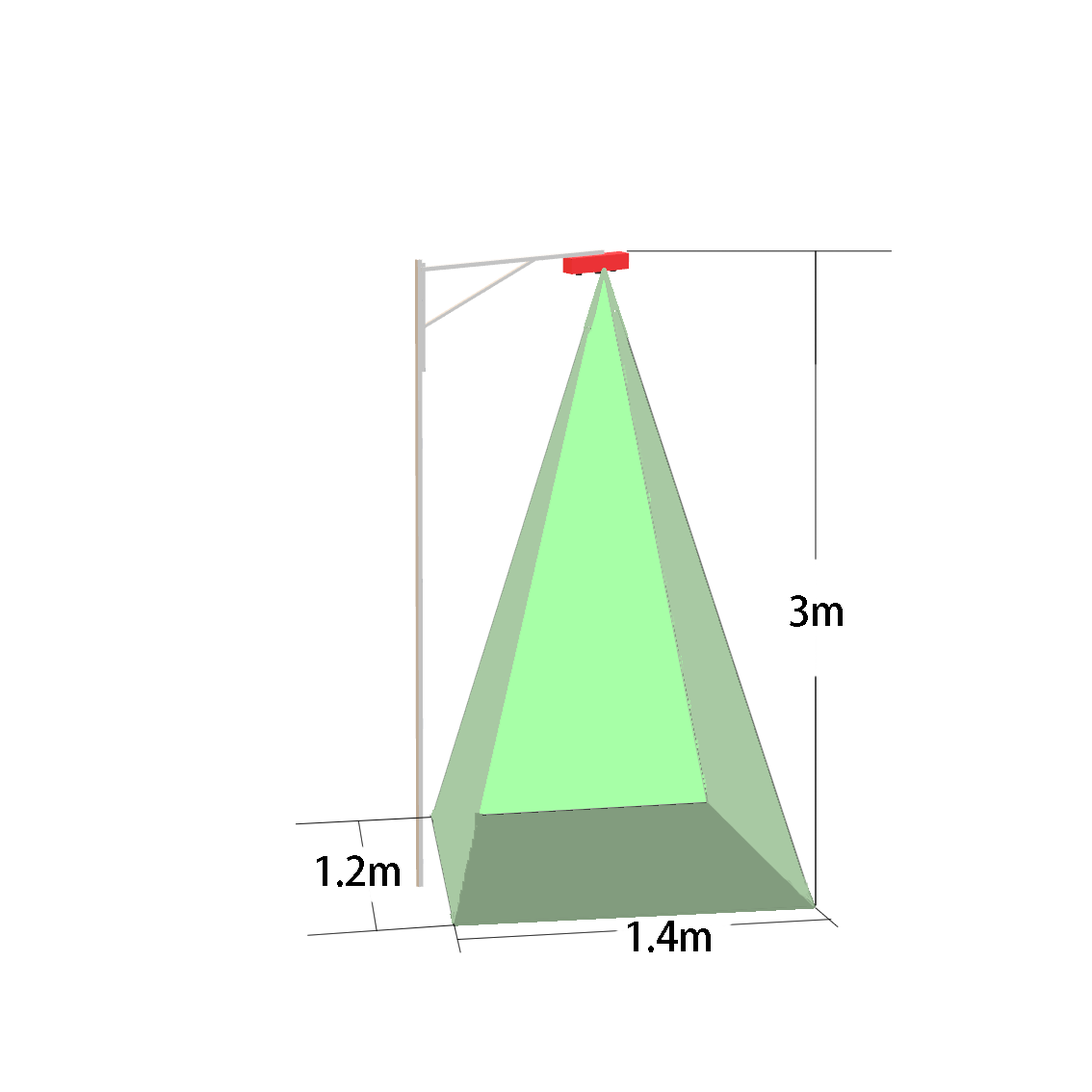
<style>
.page{position:relative;width:1092px;height:1092px;background:#ffffff}
.page>*{position:absolute;margin:0}
.t1{font:40.4px "AdobeHeitiStd-Regular";color:#000000}
</style>
<div class="page">
<p class="t1" style="left:790px;top:595px;width:53px;height:32px">3m</p>
<p class="t1" style="left:317px;top:855px;width:83px;height:32px">1.2m</p>
<p class="t1" style="left:628px;top:921px;width:83px;height:31px">1.4m</p>
</div>
